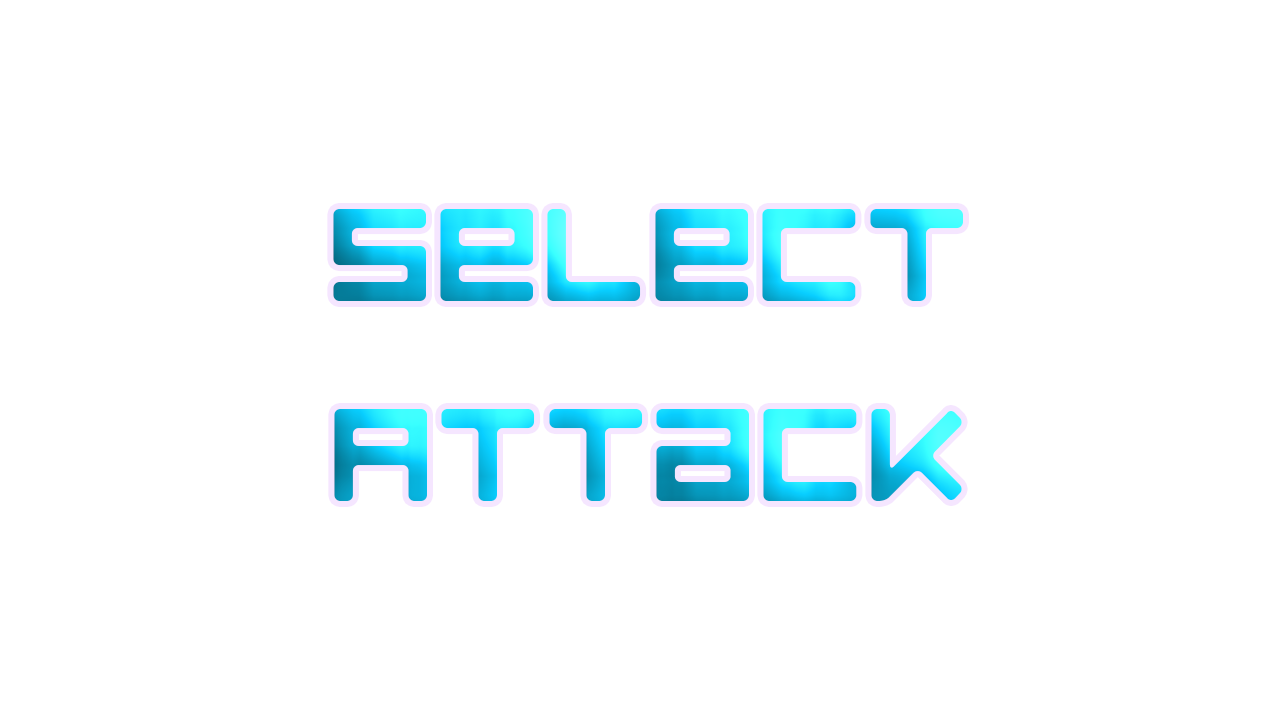
<style>
.page{position:relative;width:1280px;height:720px;background:#ffffff}
.page>*{position:absolute;margin:0}
.t1{font:166.7px "LuggageRoundRegular"}
</style>
<div class="page">
<p class="t1" style="left:333px;top:209px;width:630px;height:292px;text-align:center">Select Attack</p>
</div>
